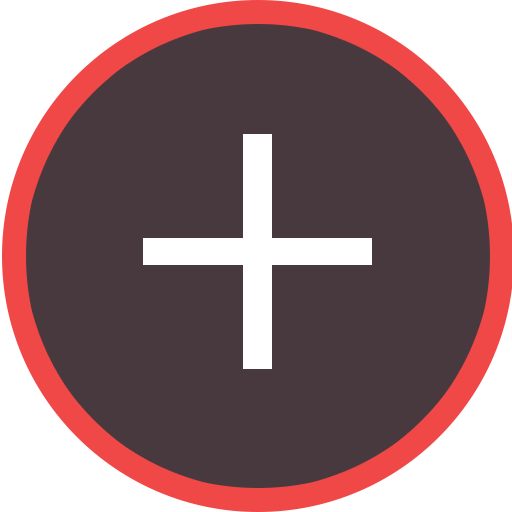
<style>
.page{position:relative;width:512px;height:512px;background:#48393e}
.page>*{position:absolute;margin:0}
.t1{font:441.4px "MyriadPro-Regular";color:#ffffff}
</style>
<div class="page">
<p class="t1" style="left:143px;top:134px;width:229px;height:235px">+</p>
</div>
